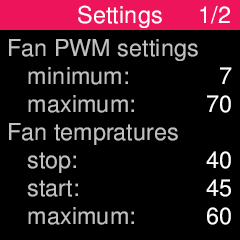
<style>
.page{position:relative;width:240px;height:240px;background:#000000}
.page>*{position:absolute;margin:0}
.t1{font:23.3px "FreeSans";letter-spacing:0.01em;color:#ffffff}
.t2{font:23.3px "FreeSans";letter-spacing:0.01em;color:#c0c0c0}
</style>
<div class="page">
<p class="t1" style="left:78px;top:5px;width:84px;height:23px">Settings</p>
<p class="t1" style="left:200px;top:5px;width:30px;height:19px">1/2</p>
<p class="t2" style="left:9px;top:39px;width:189px;height:186px">Fan PWM settings<br>   minimum:<br>   maximum:<br>Fan tempratures<br>   stop:<br>   start:<br>   maximum:</p>
<p class="t1" style="left:206px;top:67px;width:26px;height:158px;text-align:right">7<br>70<br><br>40<br>45<br>60</p>
</div>
